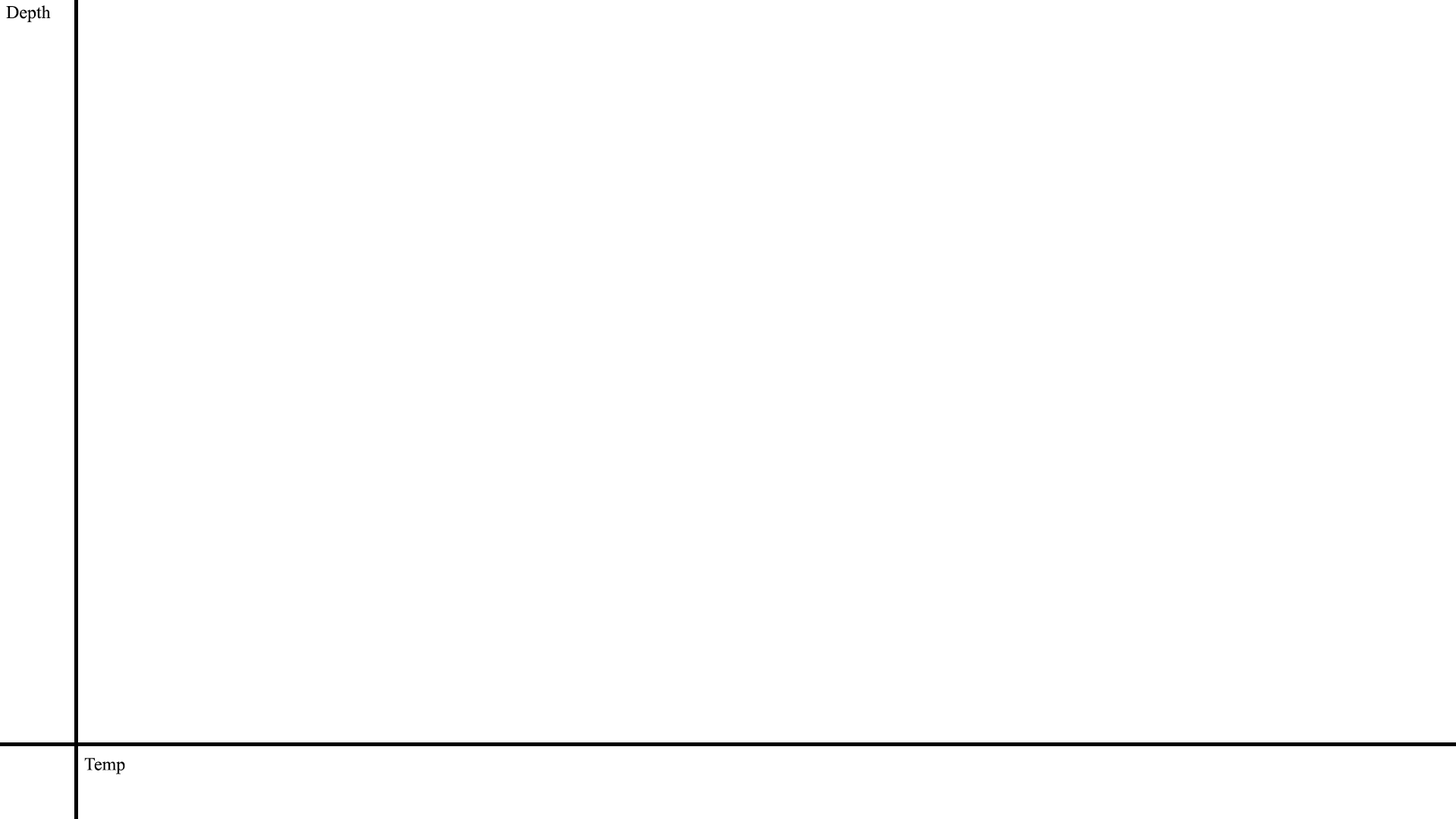
<style>
.page{position:relative;width:1456px;height:819px;background:#ffffff}
.page>*{position:absolute;margin:0}
.t1{font:18.2px "TimesNewRomanPSMT";color:#000000}
</style>
<div class="page">
<p class="t1" style="left:6px;top:5px;width:45px;height:18px">Depth</p>
<p class="t1" style="left:84px;top:758px;width:41px;height:16px">Temp</p>
</div>
